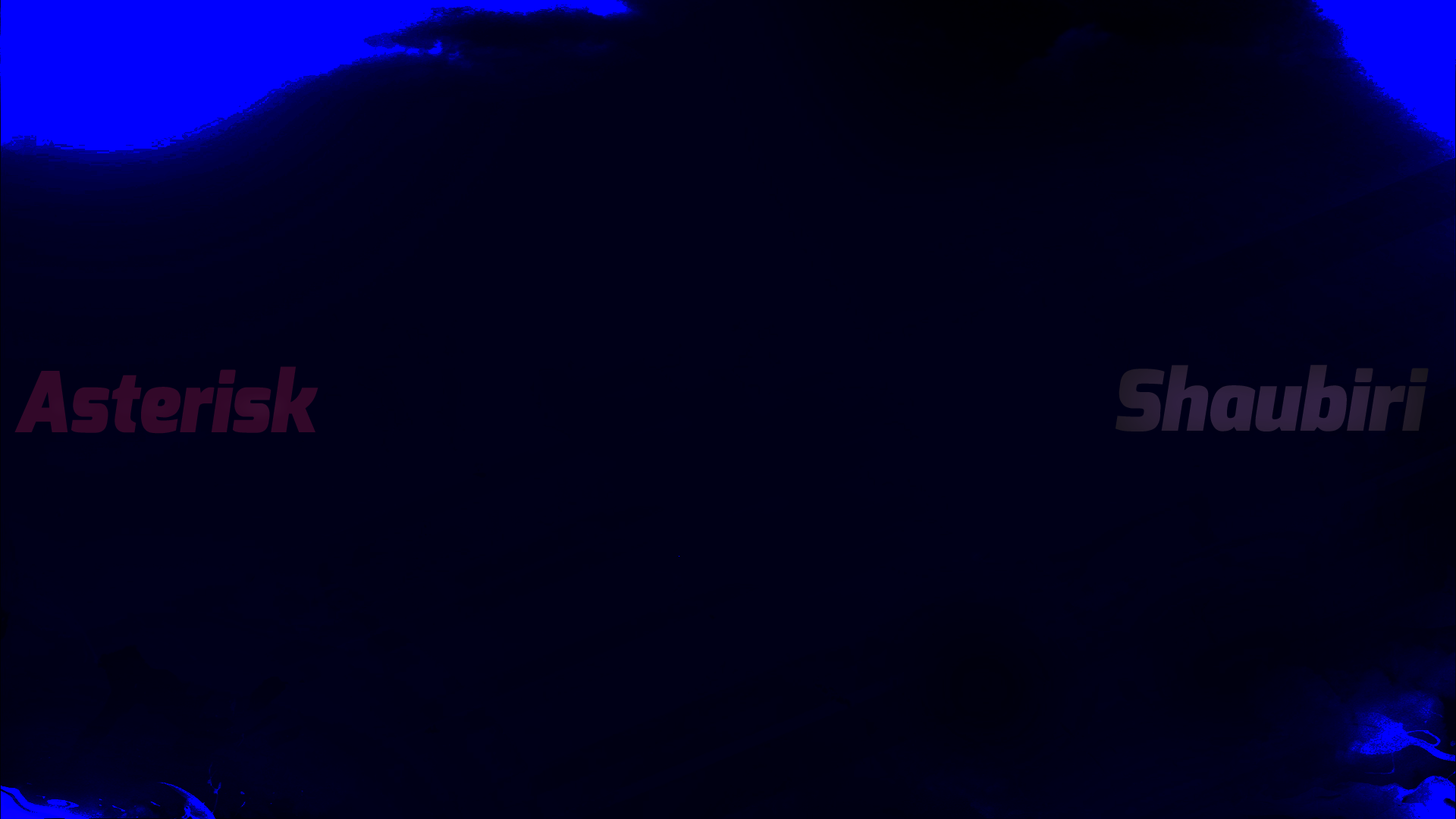
<style>
.page{position:relative;width:1456px;height:819px;background:#000018}
.page>*{position:absolute;margin:0}
.t1{font:83.8px "Exo-BlackItalic";color:#2d203c}
.t2{font:83.8px "Exo-BlackItalic";color:#320829;scale:0.93 1}
</style>
<div class="page">
<p class="t1" style="left:1115px;top:365px;width:314px;height:66px">Shaubiri</p>
<p class="t2" style="left:14px;top:366px;width:304px;height:68px">Asterisk</p>
</div>
